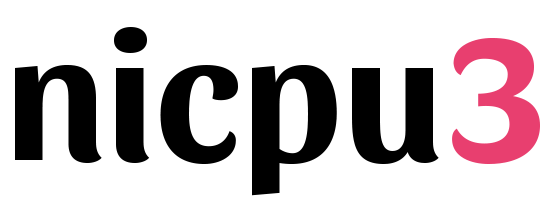
<style>
.page{position:relative;width:556px;height:218px;background:#ffffff}
.page>*{position:absolute;margin:0}
.t1{font:180px "Sansita-Bold";color:#000000}
.t2{font:180px "Sansita-Bold";color:#e83f6f}
</style>
<div class="page">
<p class="t1" style="left:15px;top:27px;width:525px;height:169px">nicpu<span class="t2">3</span></p>
</div>
